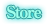
<style>
.page{position:relative;width:48px;height:25px}
.page>*{position:absolute;margin:0}
.t1{font:16px "RyuminPro-ExBold";letter-spacing:-0.08em;color:#9cffed}
</style>
<div class="page">
<p class="t1" style="left:6px;top:5px;width:36px;height:14px">Store</p>
</div>
